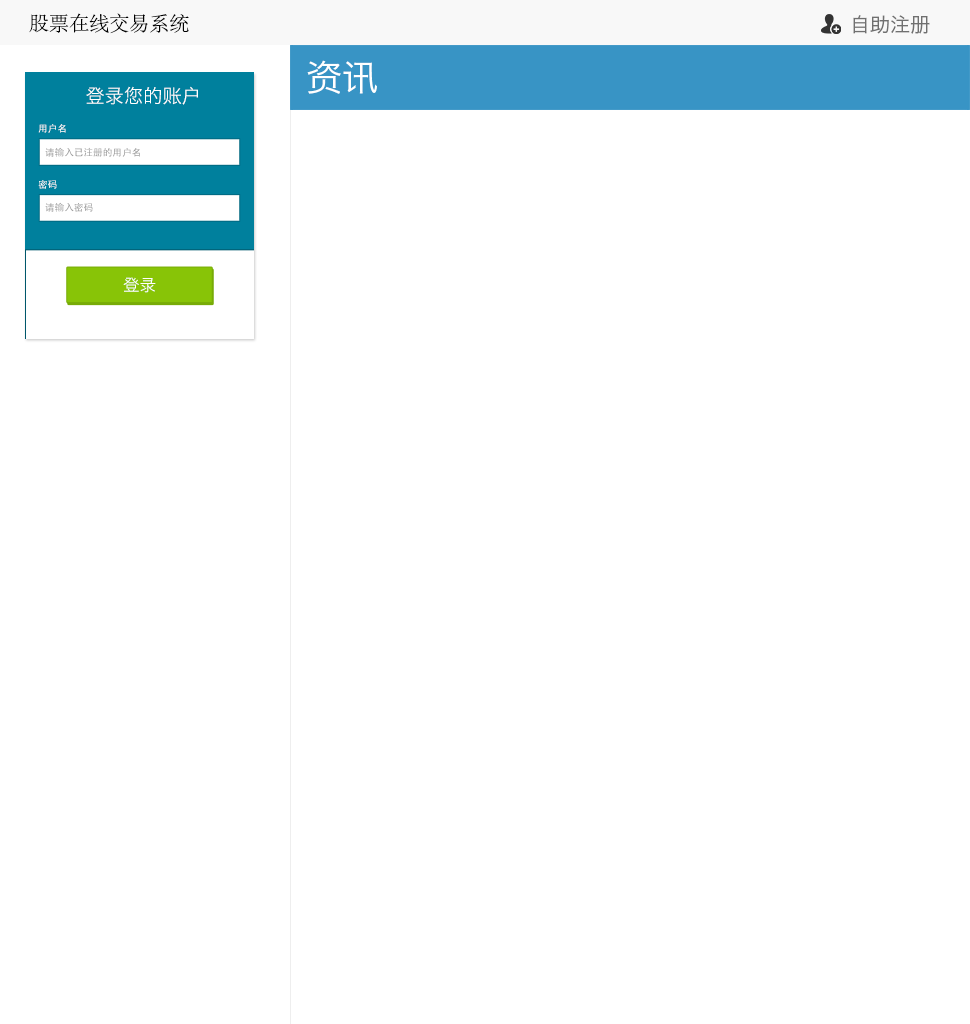
<style>
.page{position:relative;width:970px;height:1024px;background:#ffffff}
.page>*{position:absolute;margin:0}
.t1{font:20px "AdobeSongStd-Light";color:#000000}
.t2{font:20px "HiraginoSansGB-W3";color:#707070}
.t3{font:36px "HiraginoSansGB-W3";color:#ffffff}
.t4{font:19.3px "HiraginoSansGB-W3";color:#ffffff}
.t5{font:9.7px "AdobeHeitiStd-Regular";color:#ffffff}
.t6{font:9.7px "AdobeHeitiStd-Regular";color:#999999}
.t7{font:16.6px "HiraginoSansGB-W3";color:#ffffff}
</style>
<div class="page">
<p class="t1" style="left:29px;top:13px;width:160px;height:21px">股票在线交易系统</p>
<p class="t2" style="left:853px;top:15px;width:77px;height:19px">自助注册</p>
<p class="t3" style="left:307px;top:60px;width:70px;height:34px">资讯</p>
<p class="t4" style="left:86px;top:86px;width:112px;height:19px">登录您的账户</p>
<p class="t5" style="left:38px;top:124px;width:28px;height:9px">用户名</p>
<p class="t6" style="left:45px;top:147px;width:95px;height:10px">请输入已注册的用户名</p>
<p class="t5" style="left:38px;top:180px;width:19px;height:9px">密码</p>
<p class="t6" style="left:45px;top:202px;width:48px;height:10px">请输入密码</p>
<p class="t7" style="left:123px;top:277px;width:33px;height:16px">登录</p>
</div>
